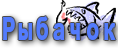
<style>
.page{position:relative;width:118px;height:50px;background:#ffffff}
.page>*{position:absolute;margin:0}
.t1{font:27.5px "HiraKakuStd-W8";color:#537bfd;scale:0.61 1}
</style>
<div class="page">
<p class="t1" style="left:3px;top:16px;width:113px;height:24px">Рыбачок</p>
</div>
